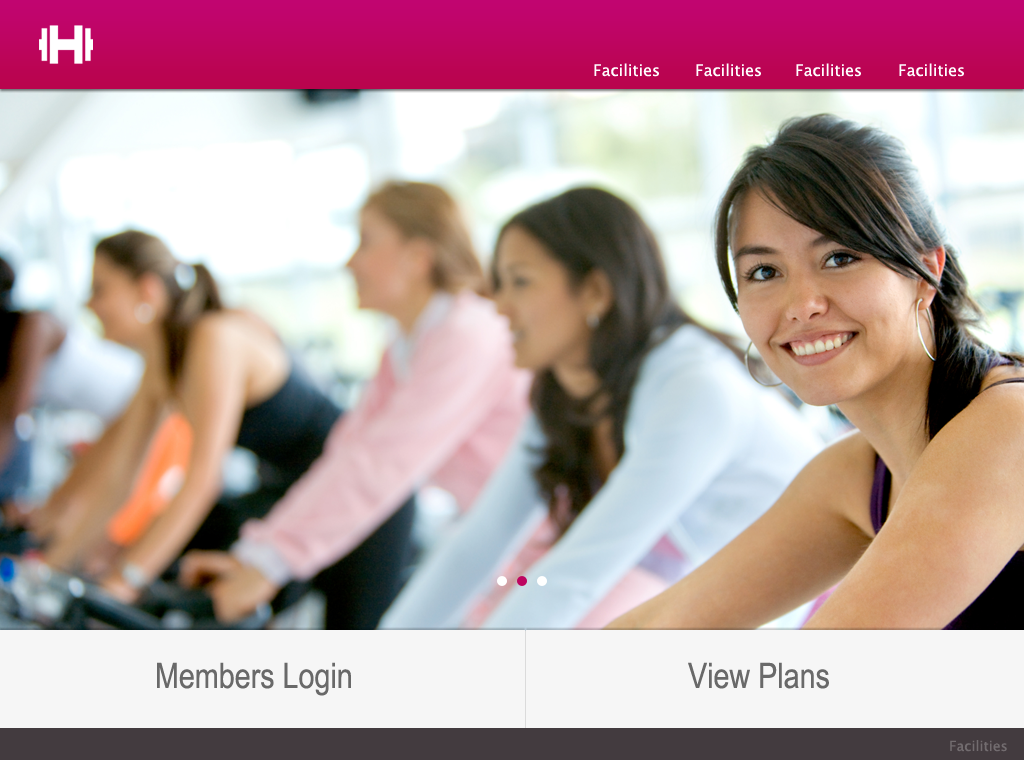
<style>
.page{position:relative;width:1024px;height:760px}
.page>*{position:absolute;margin:0}
.t1{font:16px "LucidaSansUnicode";color:#fffefe}
.t2{font:35px "ArialNarrow";color:#696969}
.t3{font:14px "LucidaSansUnicode";color:#726c6f}
</style>
<div class="page">
<p class="t1" style="left:594px;top:63px;width:65px;height:14px">Facilities</p>
<p class="t1" style="left:696px;top:63px;width:65px;height:14px">Facilities</p>
<p class="t1" style="left:796px;top:63px;width:65px;height:14px">Facilities</p>
<p class="t1" style="left:899px;top:63px;width:65px;height:14px">Facilities</p>
<p class="t2" style="left:157px;top:662px;width:194px;height:34px">Members Login</p>
<p class="t2" style="left:688px;top:662px;width:141px;height:27px">View Plans</p>
<p class="t3" style="left:950px;top:740px;width:57px;height:12px">Facilities</p>
</div>
